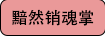
<style>
.page{position:relative;width:105px;height:36px;background:#ea9999}
.page>*{position:absolute;margin:0}
.t1{font:16.7px "AdobeHeitiStd-Regular";color:#000000}
</style>
<div class="page">
<p class="t1" style="left:12px;top:9px;width:82px;height:17px">黯然销魂掌</p>
</div>
